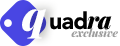
<style>
.page{position:relative;width:120px;height:46px;background:#ffffff}
.page>*{position:absolute;margin:0}
.t1{font:40.5px "PlayfairDisplay-BlackItalic";letter-spacing:-0.05em;color:#ffffff}
.t2{font:23.5px "Avenir-Black";letter-spacing:-0.03em;color:#010101}
.t3{font:23.5px "PlayfairDisplay-BlackItalic";letter-spacing:-0.03em;color:#010101}
.t4{font:10.8px "PlayfairDisplay-BlackItalic";color:#9c9c9c}
</style>
<div class="page">
<p class="t1" style="left:22px;top:9px;width:24px;height:30px">q</p>
<p class="t2" style="left:50px;top:11px;width:62px;height:19px">uad<span class="t3">ra</span></p>
<p class="t4" style="left:71px;top:28px;width:47px;height:10px">exclusive</p>
</div>
